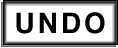
<style>
.page{position:relative;width:118px;height:48px;background:#ffffff}
.page>*{position:absolute;margin:0}
.t1{font:28px "Helvetica-Bold";letter-spacing:0.1em;color:#000000}
</style>
<div class="page">
<p class="t1" style="left:16px;top:12px;width:89px;height:22px">UNDO</p>
</div>
